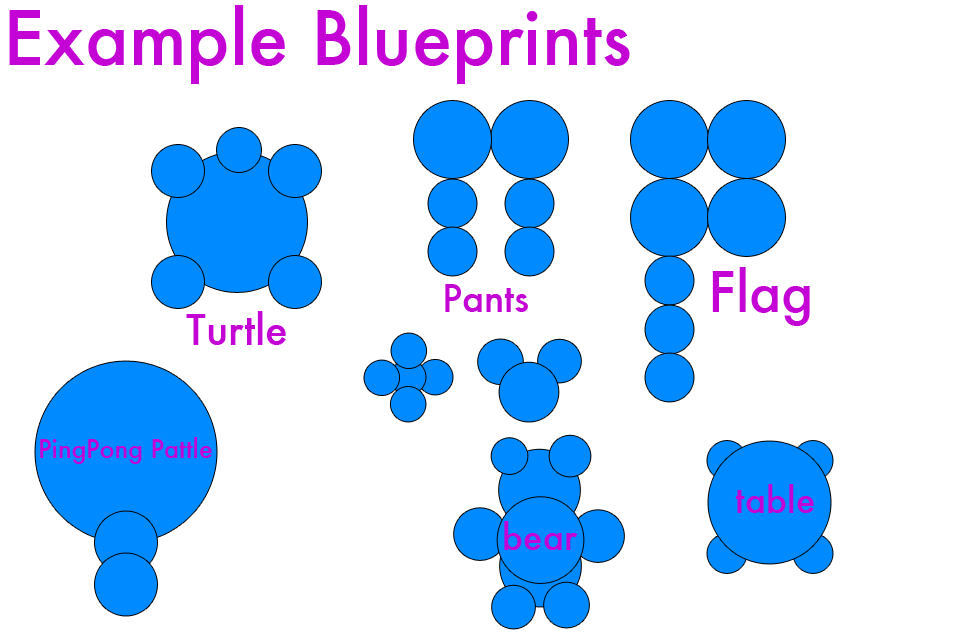
<style>
.page{position:relative;width:960px;height:640px;background:#ffffff}
.page>*{position:absolute;margin:0}
.t1{font:72.9px "Futura-Medium";color:#c404d5}
.t2{font:53.8px "Futura-Medium";color:#c404d5}
.t3{font:36.6px "Futura-Medium";color:#c404d5}
.t4{font:41.2px "Futura-Medium";color:#c404d5}
.t5{font:24.8px "Futura-Medium";color:#c404d5}
.t6{font:35.2px "Futura-Medium";color:#c404d5}
</style>
<div class="page">
<p class="t1" style="left:9px;top:5px;width:621px;height:79px">Example Blueprints</p>
<p class="t2" style="left:712px;top:267px;width:98px;height:59px">Flag</p>
<p class="t3" style="left:445px;top:284px;width:83px;height:28px">Pants</p>
<p class="t4" style="left:186px;top:311px;width:100px;height:34px">Turtle</p>
<p class="t5" style="left:40px;top:437px;width:172px;height:27px">PingPong Pattle</p>
<p class="t6" style="left:735px;top:484px;width:79px;height:29px">table</p>
<p class="t6" style="left:504px;top:521px;width:74px;height:29px">bear</p>
</div>
